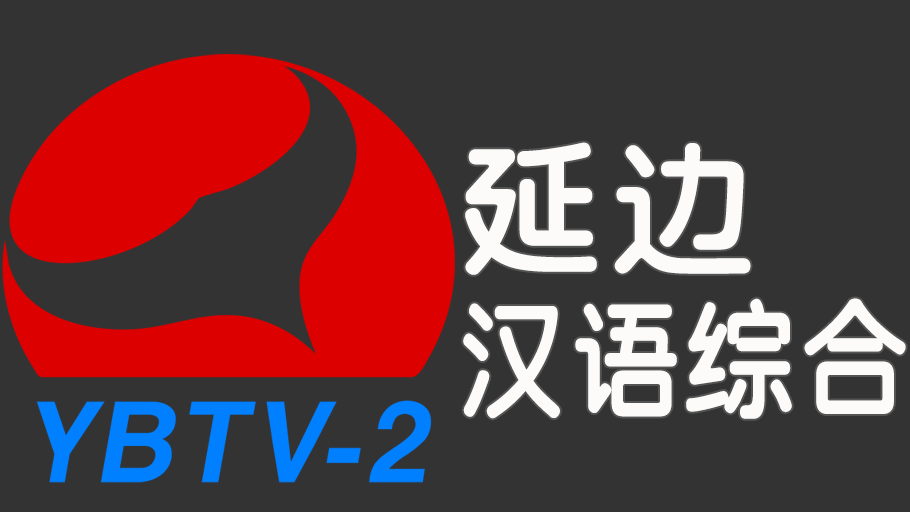
<style>
.page{position:relative;width:910px;height:512px;background:#333333}
.page>*{position:absolute;margin:0}
.t1{font:132px/160px "SJyuantijian-C-Regular";letter-spacing:0.02em;color:#fcfbf9;scale:0.85 1}
.t2{font:150px/160px "SJyuantijian-C-Regular";letter-spacing:0.02em;color:#fcfbf9}
</style>
<div class="page">
<p class="t1" style="left:463px;top:142px;width:443px;height:277px"><span class="t2">延边<br></span>汉语综合</p>
</div>
